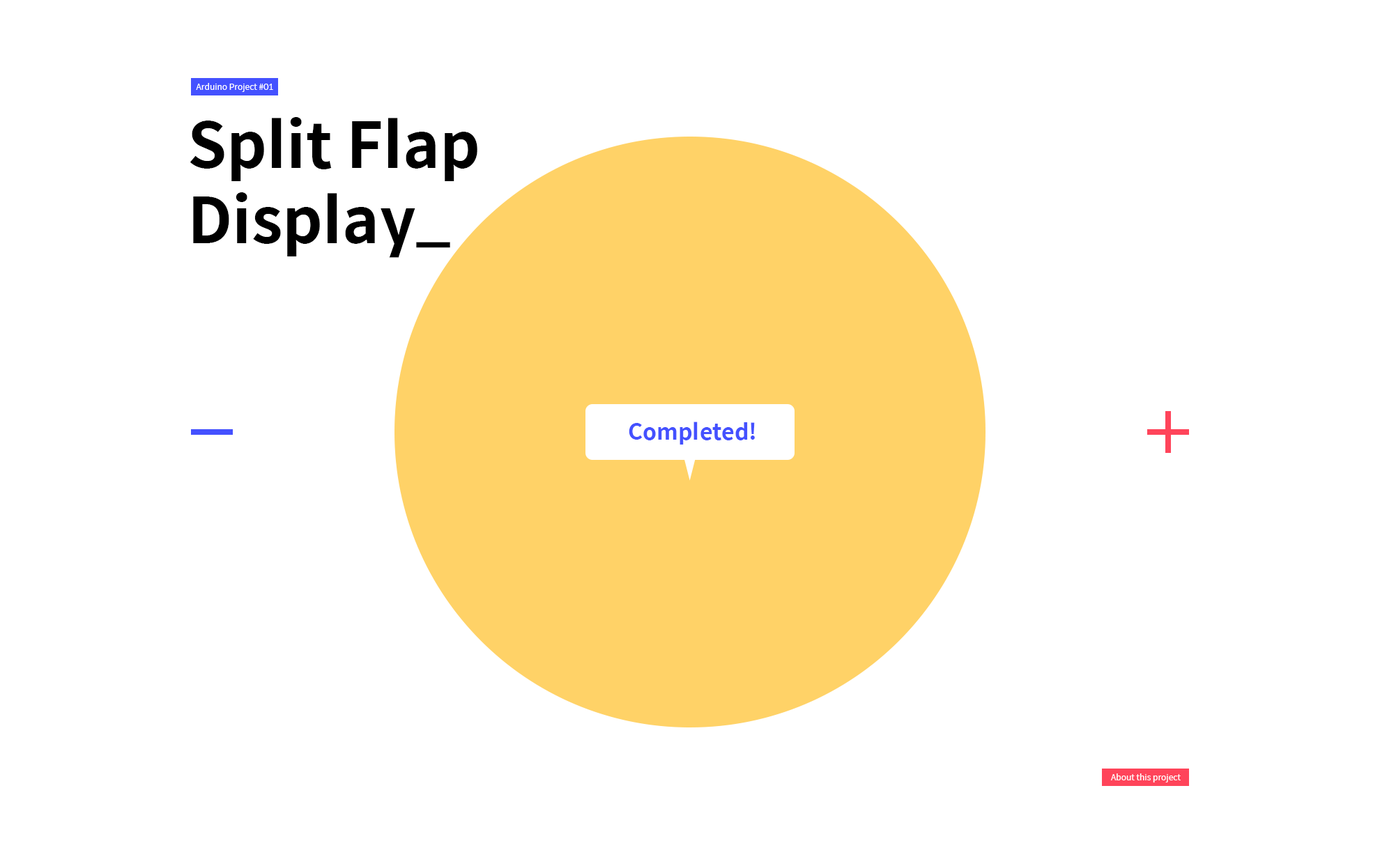
<style>
.page{position:relative;width:1380px;height:864px;background:#ffffff}
.page>*{position:absolute;margin:0}
.t1{font:8.4px "SpoqaHanSans-Regular";color:#ffffff}
.t2{font:62.7px/75.3px "SpoqaHanSans-Bold";color:#000000}
.t3{font:22.3px "SpoqaHanSans-Bold";color:#4451ff}
</style>
<div class="page">
<p class="t1" style="left:196px;top:83px;width:77px;height:9px">Arduino Project #01</p>
<p class="t2" style="left:190px;top:117px;width:287px;height:141px">Split Flap<br>Display_</p>
<p class="t3" style="left:629px;top:422px;width:126px;height:23px">Completed!</p>
<p class="t1" style="left:1110px;top:774px;width:71px;height:9px">About this project</p>
</div>
